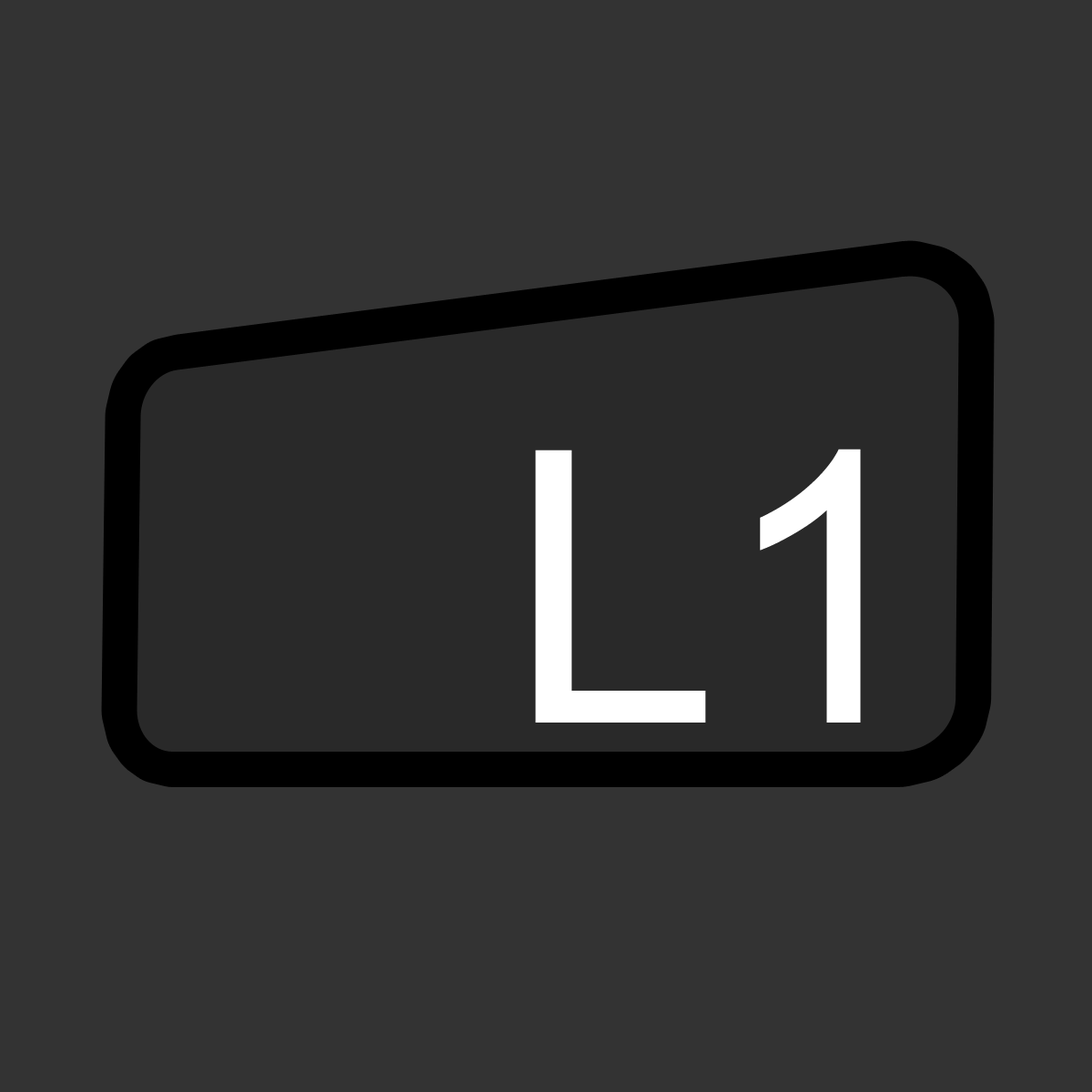
<style>
.page{position:relative;width:1092px;height:1092px;background:#333333}
.page>*{position:absolute;margin:0}
.t1{font:379.2px "ArialMT";color:#ffffff}
</style>
<div class="page">
<p class="t1" style="left:535px;top:449px;width:326px;height:274px">L1</p>
</div>
